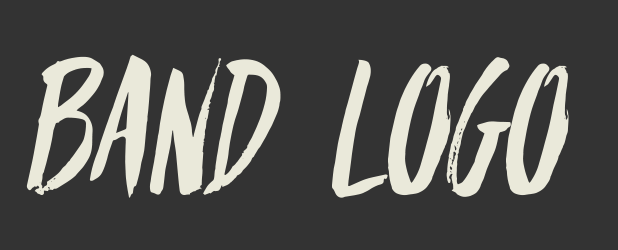
<style>
.page{position:relative;width:618px;height:250px;background:#333333}
.page>*{position:absolute;margin:0}
.t1{font:180px "PARABOLA-Regular";letter-spacing:-0.025em;color:#eae9da}
</style>
<div class="page">
<p class="t1" style="left:26px;top:54px;width:543px;height:144px">BAND LOGO</p>
</div>
